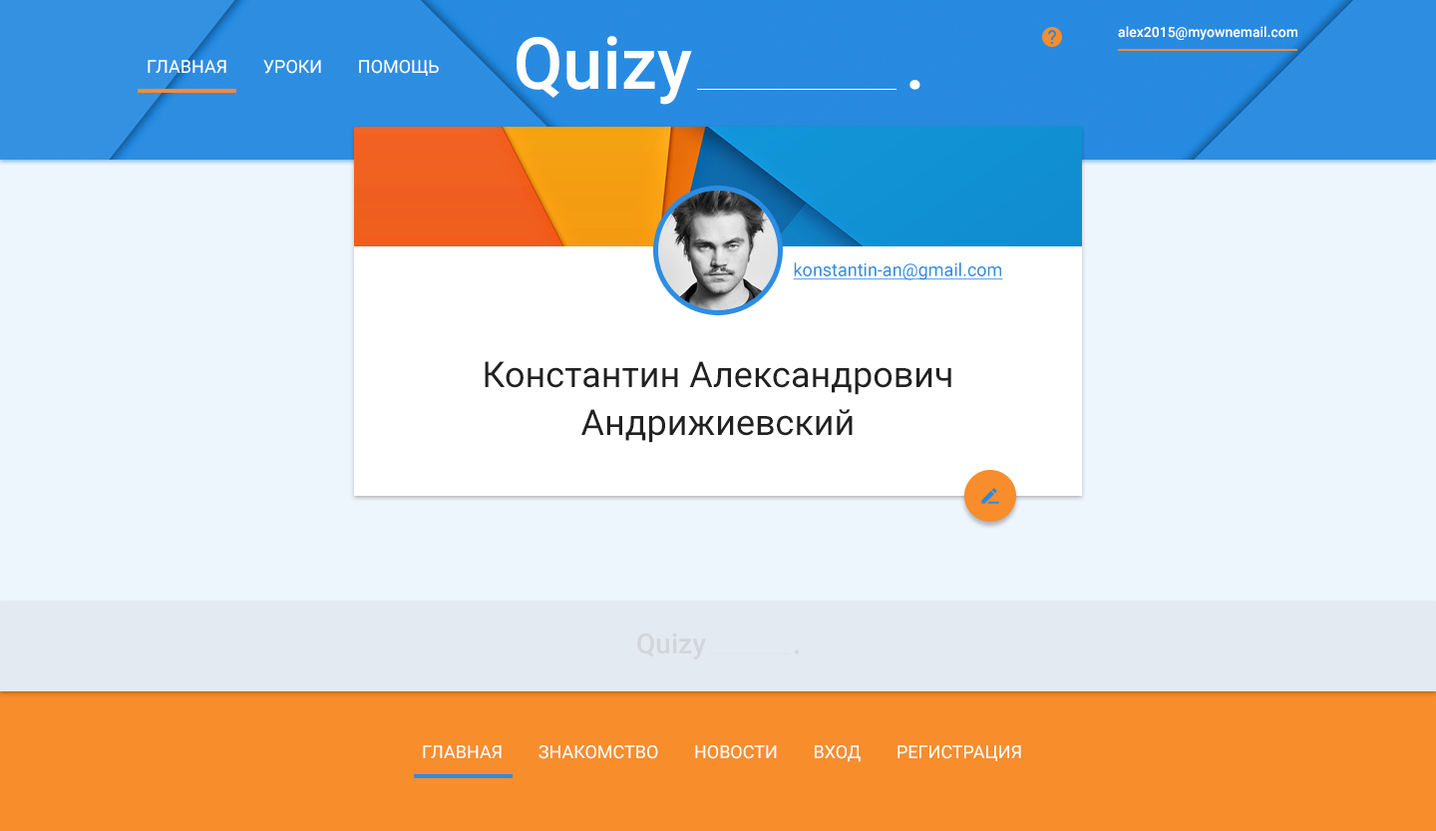
<style>
.page{position:relative;width:1436px;height:831px;background:#eef6fd}
.page>*{position:absolute;margin:0}
.t1{font:14px "Roboto-Medium";color:#ffffff}
.t2{font:71.8px "Roboto-Medium";color:#ffffff}
.t3{font:17.9px "Roboto-Regular";color:#ffffff;text-transform:uppercase}
.t4{font:17.9px "Roboto-Regular";color:#2c8de1;text-decoration:underline}
.t5{font:35.9px/47.9px "Roboto-Regular";color:#212121}
.t6{font:27.9px "Roboto-Medium";color:#d1d6dc}
</style>
<div class="page">
<p class="t1" style="left:1118px;top:26px;width:179px;height:14px">alex2015@myownemail.com</p>
<p class="t2" style="left:516px;top:36px;width:176px;height:69px">Quizy</p>
<p class="t3" style="left:148px;top:60px;width:291px;height:16px">Главная        Уроки        Помощь</p>
<p class="t2" style="left:909px;top:80px;width:11px;height:10px">.</p>
<p class="t4" style="left:793px;top:262px;width:210px;height:18px">konstantin-an@gmail.com</p>
<p class="t5" style="left:485px;top:361px;width:466px;height:82px;text-align:center">Константин Александрович Андрижиевский</p>
<p class="t6" style="left:637px;top:632px;width:69px;height:27px">Quizy</p>
<p class="t6" style="left:795px;top:649px;width:4px;height:5px">.</p>
<p class="t3" style="left:423px;top:745px;width:598px;height:17px">Главная        Знакомство        Новости        Вход        Регистрация</p>
</div>
